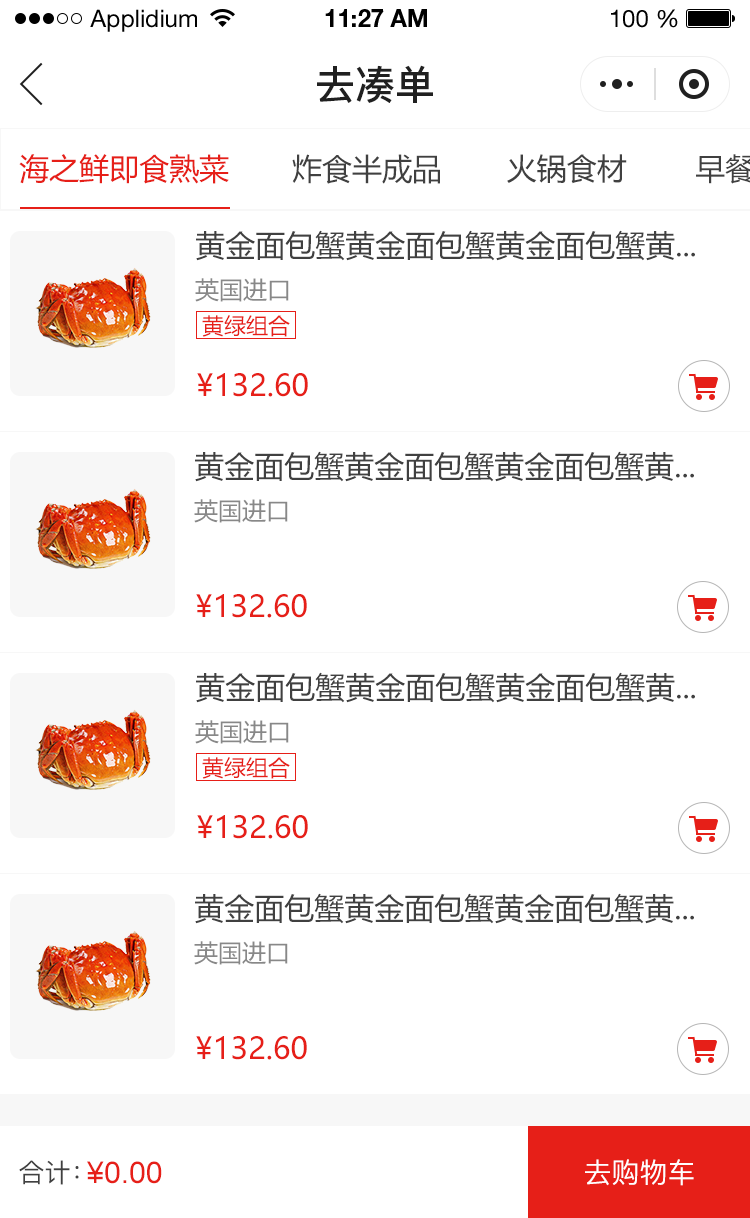
<style>
.page{position:relative;width:750px;height:1218px;background:#ffffff}
.page>*{position:absolute;margin:0}
.t1{font:24px "HelveticaNeueLTStd-Roman";color:#000000}
.t2{font:24px "HelveticaNeueLTStd-Bd";color:#000000}
.t3{font:40px "PingFang-SC-Bold";color:#202020;text-transform:uppercase}
.t4{font:30px "MicrosoftYaHei";color:#e61f18}
.t5{font:30px "MicrosoftYaHei";color:#404040}
.t6{font:30px "MicrosoftYaHei";color:#404040;text-transform:uppercase}
.t7{font:24px "MicrosoftYaHei";color:#888888;text-transform:uppercase}
.t8{font:22px "MicrosoftYaHei";color:#e61f18;text-transform:uppercase}
.t9{font:30px "MicrosoftYaHei";color:#e61f18;text-transform:uppercase}
.t10{font:26px "PingFang-SC-Medium";color:#404040;text-transform:uppercase}
.t11{font:30px "ArialMT";color:#e61f18;text-transform:uppercase}
.t12{font:28px "PingFang-SC-Medium";color:#fffefe;text-transform:uppercase}
</style>
<div class="page">
<p class="t1" style="left:90px;top:9px;width:107px;height:23px">Applidium</p>
<p class="t2" style="left:325px;top:9px;width:102px;height:18px">11:27 AM</p>
<p class="t1" style="left:611px;top:9px;width:67px;height:19px">100 %</p>
<p class="t3" style="left:317px;top:65px;width:116px;height:38px">去凑单</p>
<p class="t4" style="left:19px;top:154px;width:210px;height:30px">海之鲜即食熟菜</p>
<p class="t5" style="left:292px;top:154px;width:148px;height:30px">炸食半成品</p>
<p class="t5" style="left:507px;top:154px;width:120px;height:30px">火锅食材</p>
<p class="t6" style="left:196px;top:230px;width:499px;height:31px">黄金面包蟹黄金面包蟹黄金面包蟹黄...</p>
<p class="t7" style="left:195px;top:278px;width:94px;height:24px">英国进口</p>
<p class="t8" style="left:202px;top:315px;width:88px;height:22px">黄绿组合</p>
<p class="t9" style="left:197px;top:373px;width:111px;height:24px">¥132.60</p>
<p class="t6" style="left:195px;top:451px;width:499px;height:31px">黄金面包蟹黄金面包蟹黄金面包蟹黄...</p>
<p class="t7" style="left:194px;top:499px;width:94px;height:24px">英国进口</p>
<p class="t9" style="left:196px;top:594px;width:111px;height:24px">¥132.60</p>
<p class="t6" style="left:196px;top:672px;width:499px;height:31px">黄金面包蟹黄金面包蟹黄金面包蟹黄...</p>
<p class="t7" style="left:195px;top:720px;width:94px;height:24px">英国进口</p>
<p class="t8" style="left:202px;top:757px;width:88px;height:22px">黄绿组合</p>
<p class="t9" style="left:197px;top:815px;width:111px;height:24px">¥132.60</p>
<p class="t6" style="left:195px;top:893px;width:499px;height:31px">黄金面包蟹黄金面包蟹黄金面包蟹黄...</p>
<p class="t7" style="left:194px;top:941px;width:94px;height:24px">英国进口</p>
<p class="t9" style="left:196px;top:1036px;width:111px;height:24px">¥132.60</p>
<p class="t10" style="left:19px;top:1160px;width:60px;height:25px">合计：</p>
<p class="t11" style="left:87px;top:1161px;width:75px;height:23px">¥0.00</p>
<p class="t12" style="left:585px;top:1159px;width:109px;height:27px">去购物车</p>
</div>
